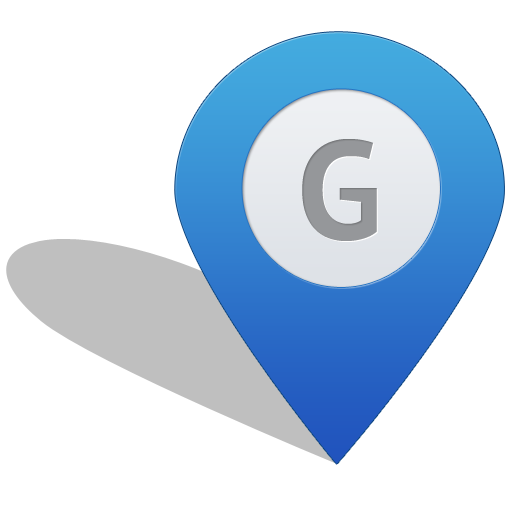
<style>
.page{position:relative;width:512px;height:512px;background:#ffffff}
.page>*{position:absolute;margin:0}
.t1{font:140px "PTSans-Bold";color:#95979a}
</style>
<div class="page">
<p class="t1" style="left:302px;top:139px;width:75px;height:102px">G</p>
</div>
